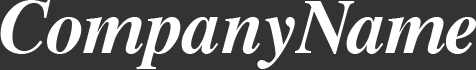
<style>
.page{position:relative;width:476px;height:70px;background:#333333}
.page>*{position:absolute;margin:0}
.t1{font:76.8px "Times-BoldItalic";color:#ffffff}
.t2{font:76.8px "Times-BoldItalic";letter-spacing:-0.075em;color:#ffffff}
</style>
<div class="page">
<p class="t1" style="left:0px;top:0px;width:476px;height:69px"><span class="t2">C</span>ompany<span class="t2">N</span>ame</p>
</div>
